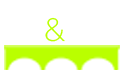
<style>
.page{position:relative;width:122px;height:70px;background:#ffffff}
.page>*{position:absolute;margin:0}
.t1{font:31.9px "Raleway-Light";color:#baff00}
</style>
<div class="page">
<p class="t1" style="left:45px;top:17px;width:20px;height:25px">&amp;</p>
</div>
